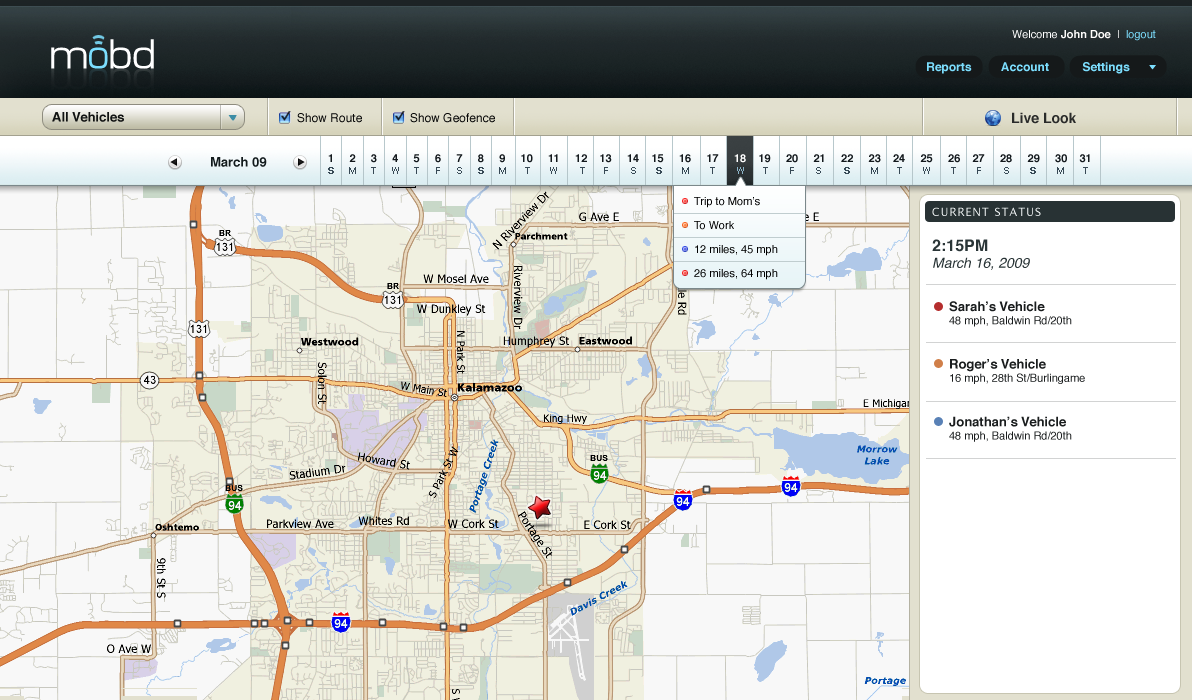
<style>
.page{position:relative;width:1192px;height:700px;background:#f8f8f8}
.page>*{position:absolute;margin:0}
.t1{font:11px "Helvetica-Bold";color:#fefdfc}
.t2{font:11px "Helvetica";color:#ffffff}
.t3{font:11px "Helvetica";color:#7cdefe}
.t4{font:41.9px "Microlla";letter-spacing:-0.025em;color:#ffffff}
.t5{font:41.9px "Microlla";letter-spacing:-0.025em;color:#7cdefe}
.t6{font:12px "Helvetica-Bold";color:#7cdefe}
.t7{font:13px "Helvetica-Bold";color:#101212}
.t8{font:12px "Helvetica";color:#080808}
.t9{font:12px "Helvetica";color:#060606}
.t10{font:14px "Helvetica-Bold";color:#2a2b2a}
.t11{font:13px "Helvetica-Bold";color:#121a1c}
.t12{font:11px "Helvetica-Bold";color:#13191d}
.t13{font:11px "Helvetica-Bold";color:#ffffff}
.t14{font:11px/24px "Helvetica";color:#000000}
.t15{font:11px "LucidaGrande";letter-spacing:0.1em;color:#f9fcfd}
.t16{font:14px "Helvetica-Oblique";color:#2a3537}
.t17{font:16px "Helvetica-Bold";color:#2a3537}
.t18{font:11px "Helvetica";color:#1a1d1e}
.t19{font:13px "Helvetica-Bold";color:#1a1d1e}
</style>
<div class="page">
<p class="t1" style="left:1012px;top:30px;width:144px;height:11px"><span class="t2">Welcome </span>John Doe<span class="t2">  | </span><span class="t3"> logout</span></p>
<p class="t4" style="left:51px;top:39px;width:103px;height:30px">m<span class="t5">o</span>bd</p>
<p class="t6" style="left:927px;top:62px;width:203px;height:12px">Reports         Account          Settings</p>
<p class="t7" style="left:52px;top:112px;width:72px;height:10px">All Vehicles</p>
<p class="t8" style="left:297px;top:113px;width:65px;height:10px">Show Route</p>
<p class="t9" style="left:410px;top:113px;width:85px;height:10px">Show Geofence</p>
<p class="t10" style="left:1012px;top:112px;width:64px;height:12px">Live Look</p>
<p class="t11" style="left:211px;top:157px;width:56px;height:10px">March 09</p>
<p class="t12" style="left:328px;top:154px;width:762px;height:9px">1     2     3     4     5     6     7     8     9     10     11     12    13     14    15     16     17     <span class="t13">18</span>    19     20     21     22     23    24     25     26    27     28     29     30    31</p>
<p class="t14" style="left:694px;top:197px;width:84px;height:83px">Trip to Mom’s <br>To Work<br>12 miles, 45 mph<br>26 miles, 64 mph</p>
<p class="t15" style="left:932px;top:207px;width:109px;height:9px">CURRENT STATUS</p>
<p class="t16" style="left:932px;top:239px;width:98px;height:31px"><span class="t17">2:15PM<br></span>March 16, 2009</p>
<p class="t18" style="left:949px;top:301px;width:136px;height:141px"><span class="t19">Sarah’s Vehicle<br></span>48 mph, Baldwin Rd/20th<br><br><br><span class="t19">Roger’s Vehicle<br></span>16 mph, 28th St/Burlingame<br><br><br><span class="t19">Jonathan’s Vehicle<br></span>48 mph, Baldwin Rd/20th</p>
</div>
